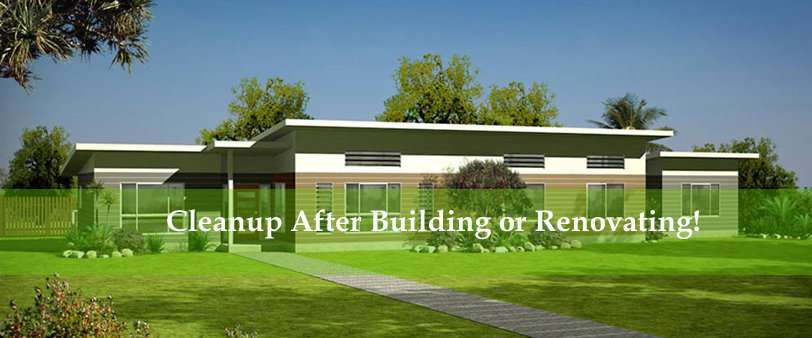
<style>
.page{position:relative;width:812px;height:338px}
.page>*{position:absolute;margin:0}
.t1{font:30px "BookAntiqua-Bold";color:#ffffff}
</style>
<div class="page">
<p class="t1" style="left:167px;top:209px;width:532px;height:30px">Cleanup After Building or Renovating!</p>
</div>
